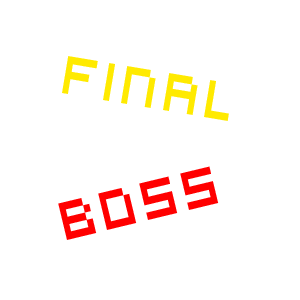
<style>
.page{position:relative;width:300px;height:300px;background:#ffffff}
.page>*{position:absolute;margin:0}
.t1{font:60px "VirtualDJ";color:#ffea00;scale:0.8 1}
.t2{font:60px "VirtualDJ";color:#ff0000;scale:0.8 1}
</style>
<div class="page">
<p class="t1" style="left:62px;top:56px;width:167px;height:65px;rotate:10deg">Final</p>
<p class="t2" style="left:58px;top:166px;width:161px;height:74px;rotate:-14deg">BOSS</p>
</div>
